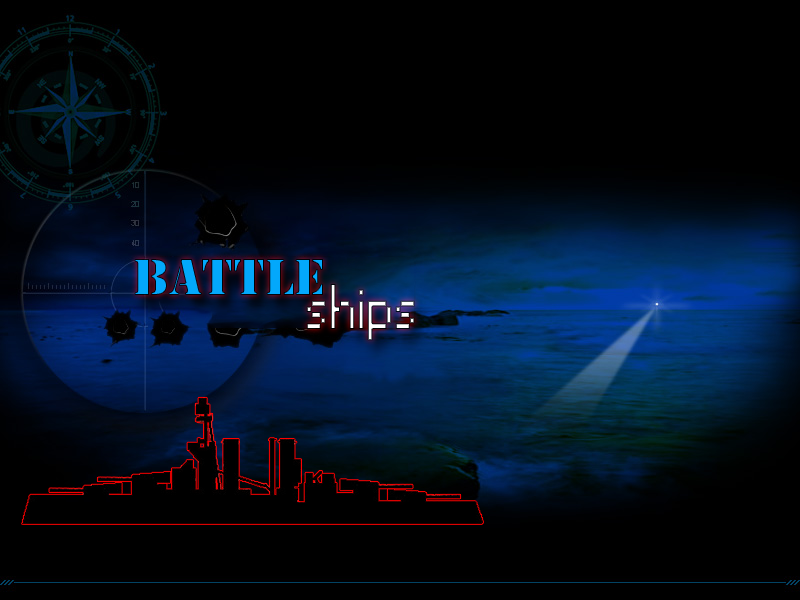
<style>
.page{position:relative;width:800px;height:600px;background:#000000}
.page>*{position:absolute;margin:0}
.t1{font:48px "StencilStd";color:#03a8fb}
.t2{font:60px "Small Fonts"}
</style>
<div class="page">
<p class="t1" style="left:134px;top:259px;width:189px;height:36px">Battle</p>
<p class="t2" style="left:306px;top:284px;width:109px;height:57px">ships</p>
</div>
